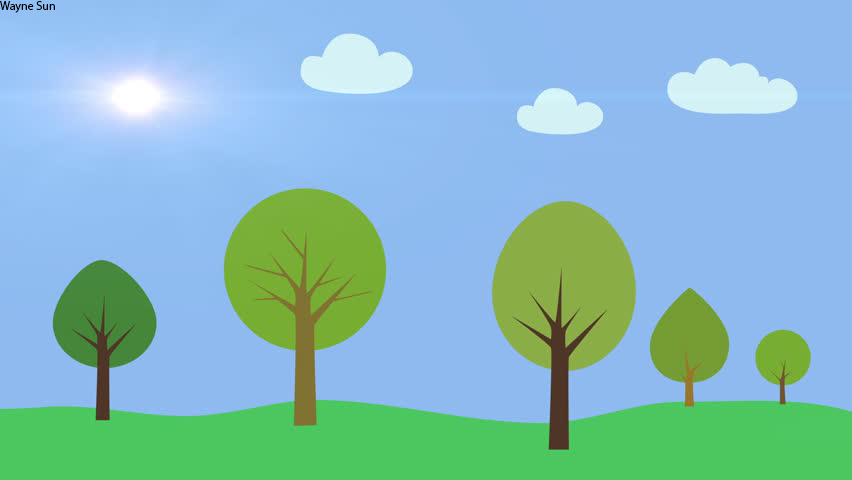
<style>
.page{position:relative;width:852px;height:480px;background:#8fbaef}
.page>*{position:absolute;margin:0}
.t1{font:12px "MyriadPro-Regular";color:#000000}
</style>
<div class="page">
<p class="t1" style="left:0px;top:1px;width:55px;height:12px">Wayne Sun</p>
</div>
